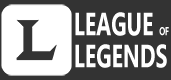
<style>
.page{position:relative;width:171px;height:80px;background:#333333}
.page>*{position:absolute;margin:0}
.t1{font:32px/32px "Gadugi-Bold";color:#ffffff;scale:0.67 1}
.t2{font:11.5px/32px "Gadugi-Bold";color:#ffffff;scale:0.67 1}
</style>
<div class="page">
<p class="t1" style="left:75px;top:12px;width:94px;height:56px">LEAGUE <span class="t2">OF<br></span>LEGENDS</p>
</div>
